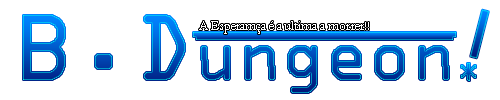
<style>
.page{position:relative;width:500px;height:100px;background:#ffffff}
.page>*{position:absolute;margin:0}
.t1{font:72px "OCRAExtended"}
.t2{font:100px "OCRAExtended"}
.t3{font:14px "Centaur";color:#ffffff}
.t4{font:36px "OCRAExtended"}
</style>
<div class="page">
<p class="t1" style="left:23px;top:15px;width:426px;height:78px"><span class="t2">B.D</span>ungeon</p>
<p class="t3" style="left:199px;top:21px;width:170px;height:13px">A Esperamça é a ultima a morrer!!</p>
<p class="t4" style="left:461px;top:63px;width:15px;height:18px">*</p>
</div>
